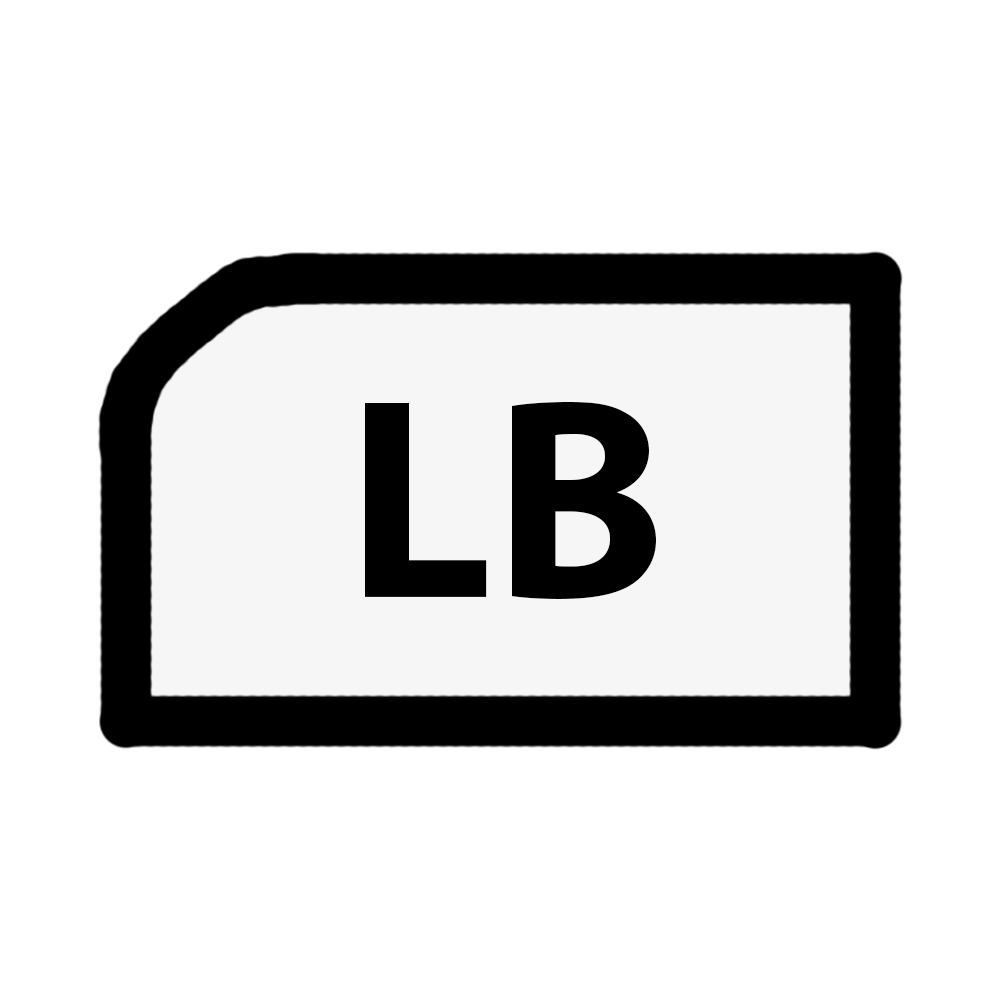
<style>
.page{position:relative;width:1000px;height:1000px;background:#ffffff}
.page>*{position:absolute;margin:0}
.t1{font:287.9px "MyriadPro-Bold";color:#000000}
</style>
<div class="page">
<p class="t1" style="left:365px;top:402px;width:291px;height:197px">LB</p>
</div>
